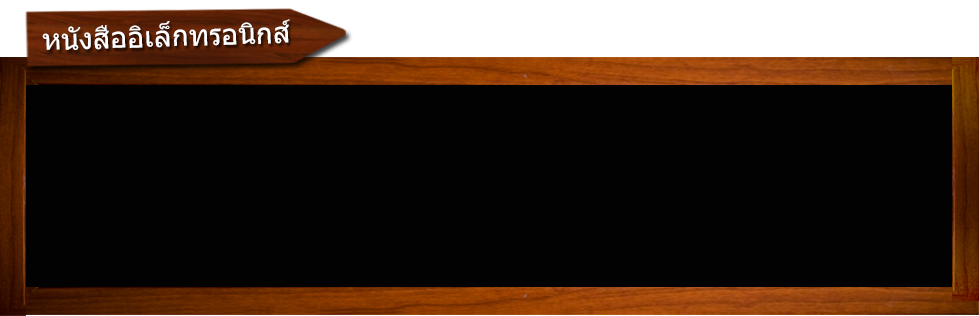
<style>
.page{position:relative;width:979px;height:316px;background:#020202}
.page>*{position:absolute;margin:0}
.t1{font:28.6px "Tahoma";color:#ffffff}
</style>
<div class="page">
<p class="t1" style="left:42px;top:19px;width:248px;height:31px;rotate:-2deg">หนังสืออิเล็กทรอนิกส์</p>
</div>
